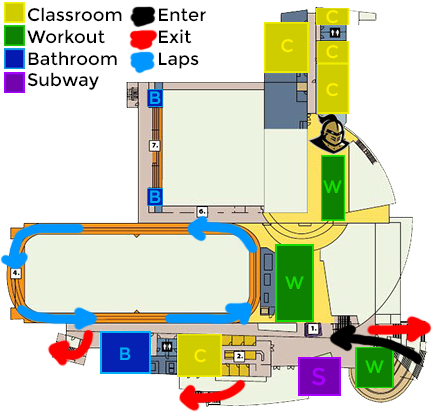
<style>
.page{position:relative;width:435px;height:418px;background:#ffffff}
.page>*{position:absolute;margin:0}
.t1{font:18px "Montserrat-Regular";color:#000000}
.t2{font:18px "Montserrat-Regular";color:#fff200}
.t3{font:18px "Montserrat-Regular";color:#00aef7}
.t4{font:18px "Montserrat-Regular";color:#15dc00}
.t5{font:24px "Montserrat-Regular";color:#a800ff}
</style>
<div class="page">
<p class="t1" style="left:27px;top:7px;width:95px;height:83px">Classroom<br>Workout<br>Bathroom<br>Subway</p>
<p class="t1" style="left:159px;top:8px;width:47px;height:61px">Enter<br>Exit<br>Laps</p>
<p class="t2" style="left:326px;top:10px;width:12px;height:14px">C</p>
<p class="t2" style="left:281px;top:39px;width:12px;height:14px">C</p>
<p class="t2" style="left:326px;top:45px;width:12px;height:14px">C</p>
<p class="t2" style="left:326px;top:83px;width:12px;height:14px">C</p>
<p class="t3" style="left:150px;top:91px;width:11px;height:13px">B</p>
<p class="t4" style="left:323px;top:180px;width:19px;height:13px">W</p>
<p class="t3" style="left:150px;top:190px;width:11px;height:13px">B</p>
<p class="t4" style="left:285px;top:276px;width:19px;height:13px">W</p>
<p class="t3" style="left:120px;top:347px;width:11px;height:13px">B</p>
<p class="t2" style="left:194px;top:349px;width:12px;height:14px">C</p>
<p class="t4" style="left:365px;top:360px;width:19px;height:13px">W</p>
<p class="t5" style="left:312px;top:367px;width:13px;height:19px">S</p>
</div>
